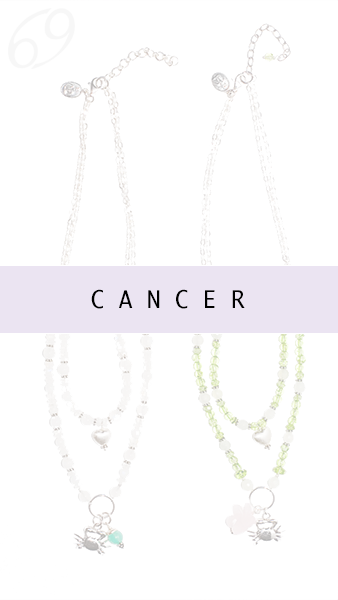
<style>
.page{position:relative;width:338px;height:600px;background:#ffffff}
.page>*{position:absolute;margin:0}
.t1{font:23.5px "Ayuthaya";color:#000000}
</style>
<div class="page">
<p class="t1" style="left:91px;top:289px;width:154px;height:20px">C A N C E R</p>
</div>
